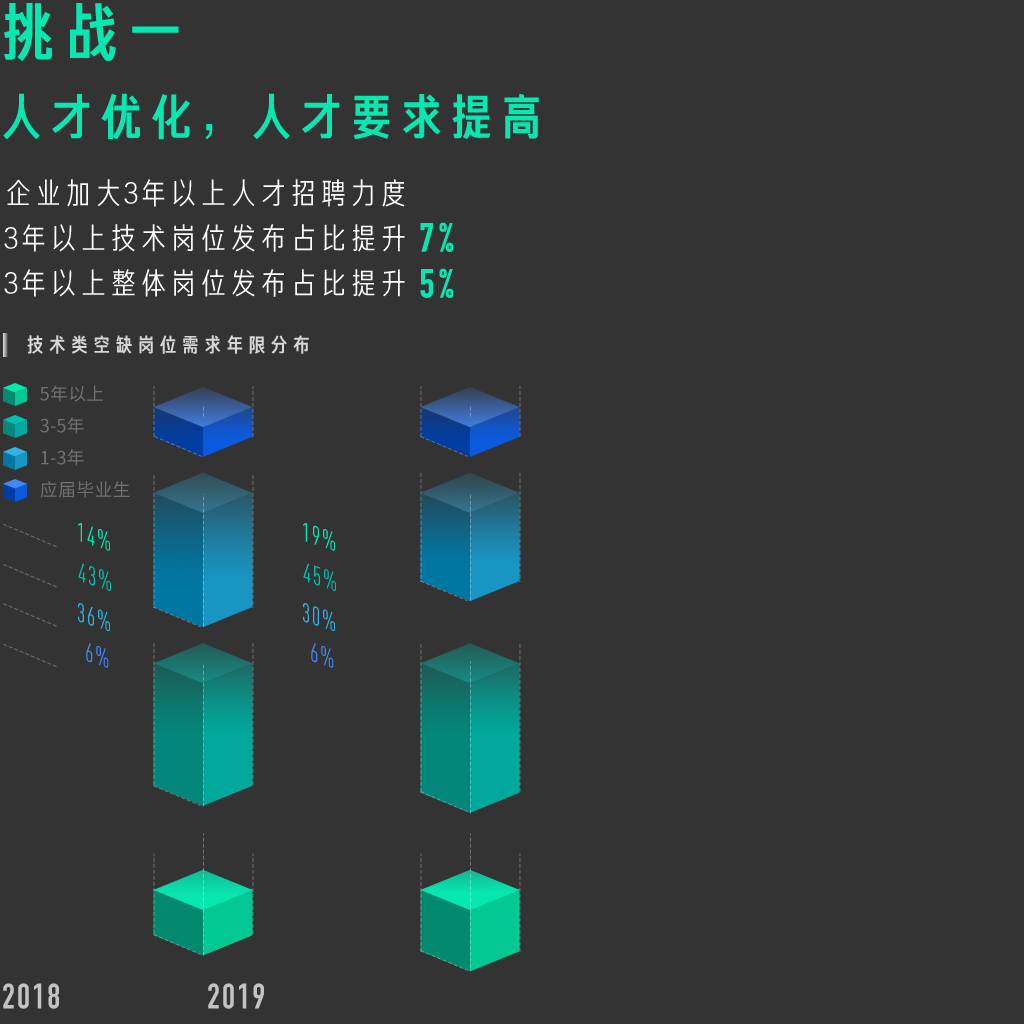
<style>
.page{position:relative;width:1024px;height:1024px;background:#333333}
.page>*{position:absolute;margin:0}
.t1{font:63.4px "FZCJHJW--GB1-0";color:#05e9b1}
.t2{font:50px "FZCJHJW--GB1-0";color:#05e9b1}
.t3{font:30px "FZJHJW--GB1-0";color:#ffffff}
.t4{font:40px "DINCondensed-Bold";letter-spacing:0.1em;color:#05e9b1;font-weight:bold}
.t5{font:20.2px "FZCJHJW--GB1-0";letter-spacing:0.1em;color:#d7d7d7}
.t6{font:18px "SourceHanSansCN-Regular";letter-spacing:0.01em;color:#717171}
.t7{font:26.3px "DINCond-Regular";letter-spacing:0.06em;color:#05e9b1;scale:0.95 1}
.t8{font:26.3px "DINCond-Regular";letter-spacing:0.06em;color:#00c0b0;scale:0.95 1}
.t9{font:26.3px "DINCond-Regular";letter-spacing:0.06em;color:#2fb4e5;scale:0.95 1}
.t10{font:26.3px "DINCond-Regular";letter-spacing:0.06em;color:#4188ff;scale:0.95 1}
.t11{font:35px "DINCondensed-Bold";letter-spacing:0.06em;color:#c3c3c3}
</style>
<div class="page">
<p class="t1" style="left:4px;top:3px;width:175px;height:58px">挑战一</p>
<p class="t2" style="left:3px;top:93px;width:536px;height:47px">人才优化，人才要求提高</p>
<p class="t3" style="left:7px;top:179px;width:398px;height:28px">企业加大3年以上人才招聘力度</p>
<p class="t4" style="left:420px;top:222px;width:34px;height:30px">7%</p>
<p class="t3" style="left:4px;top:224px;width:401px;height:28px">3年以上技术岗位发布占比提升</p>
<p class="t3" style="left:4px;top:269px;width:401px;height:28px">3年以上整体岗位发布占比提升</p>
<p class="t4" style="left:420px;top:268px;width:34px;height:30px">5%</p>
<p class="t5" style="left:27px;top:335px;width:282px;height:19px">技术类空缺岗位需求年限分布</p>
<p class="t6" style="left:40px;top:385px;width:63px;height:17px">5年以上</p>
<p class="t6" style="left:40px;top:417px;width:44px;height:17px">3-5年</p>
<p class="t6" style="left:41px;top:449px;width:43px;height:17px">1-3年</p>
<p class="t6" style="left:40px;top:481px;width:90px;height:17px">应届毕业生</p>
<p class="t7" style="left:78px;top:522px;width:32px;height:29px;rotate:18deg">14%</p>
<p class="t7" style="left:303px;top:522px;width:32px;height:29px;rotate:18deg">19%</p>
<p class="t8" style="left:78px;top:563px;width:33px;height:28px;rotate:18deg">43%</p>
<p class="t8" style="left:303px;top:563px;width:33px;height:28px;rotate:18deg">45%</p>
<p class="t9" style="left:78px;top:603px;width:32px;height:29px;rotate:18deg">36%</p>
<p class="t9" style="left:303px;top:603px;width:32px;height:29px;rotate:18deg">30%</p>
<p class="t10" style="left:86px;top:643px;width:23px;height:25px;rotate:18deg">6%</p>
<p class="t10" style="left:311px;top:643px;width:23px;height:25px;rotate:18deg">6%</p>
<p class="t11" style="left:3px;top:983px;width:56px;height:26px">2018</p>
<p class="t11" style="left:208px;top:983px;width:56px;height:26px">2019</p>
</div>
